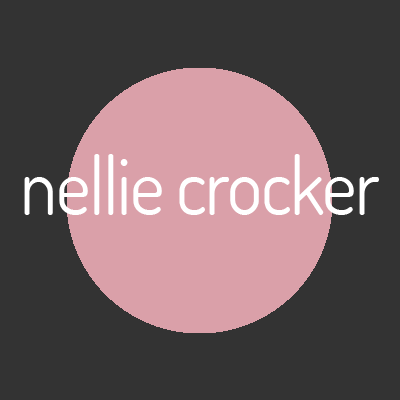
<style>
.page{position:relative;width:400px;height:400px;background:#333333}
.page>*{position:absolute;margin:0}
.t1{font:80.2px "Dosis-Regular";letter-spacing:-0.02em;color:#ffffff;scale:0.93 1}
</style>
<div class="page">
<p class="t1" style="left:24px;top:154px;width:355px;height:61px">nellie crocker</p>
</div>
